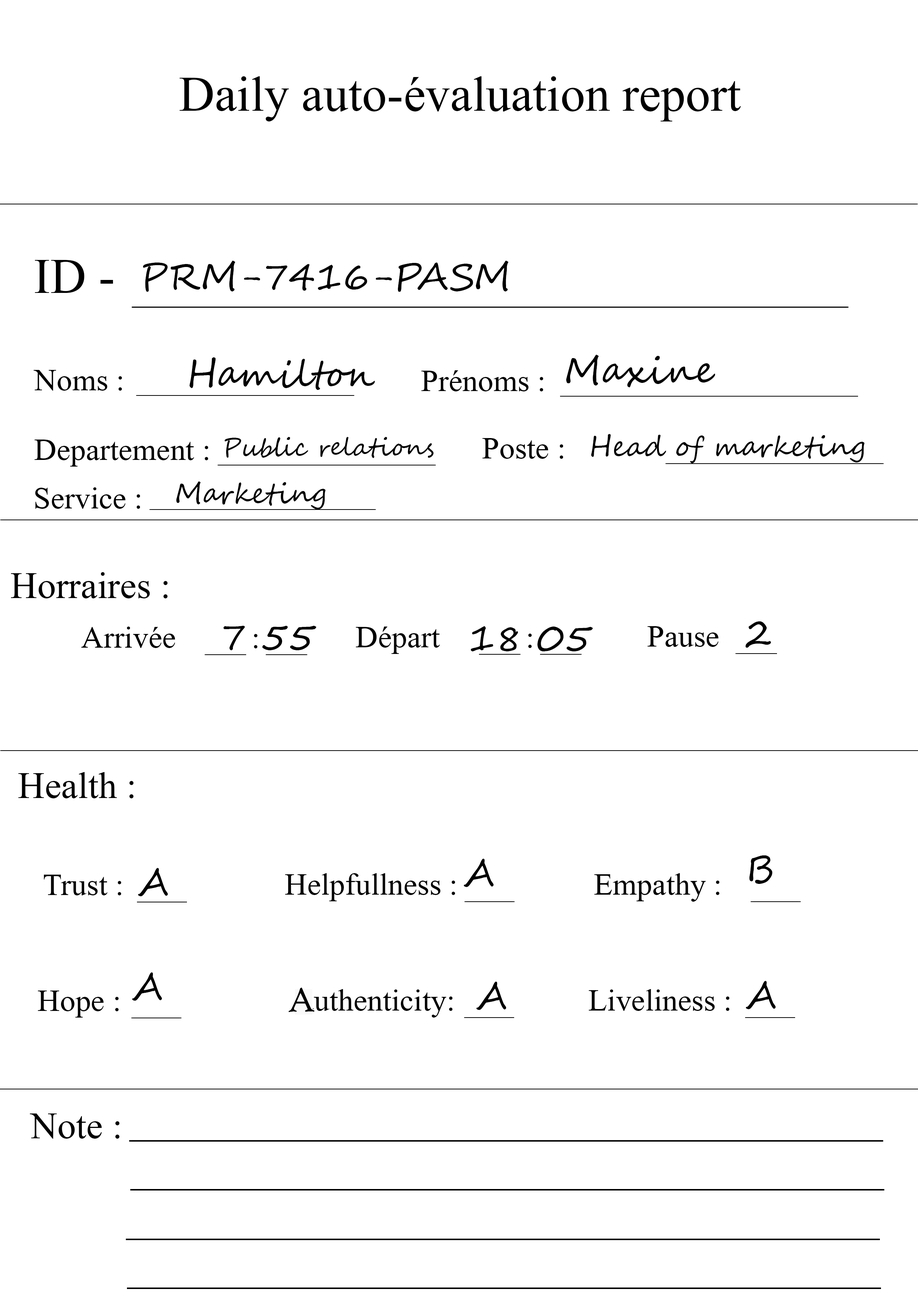
<style>
.page{position:relative;width:918px;height:1299px;background:#ffffff}
.page>*{position:absolute;margin:0}
.t1{font:74px "Microsoft-Himalaya";color:#000000}
.t2{font:37px "SegoeScript";color:#000000}
.t3{font:46.3px "Microsoft-Himalaya";color:#000000}
.t4{font:24.7px "SegoeScript";color:#000000}
.t5{font:27.8px "SegoeScript";color:#000000}
.t6{font:55.5px "Microsoft-Himalaya";color:#000000}
.t7{font:37px "HighTowerText-Reg";color:#000000}
</style>
<div class="page">
<p class="t1" style="left:180px;top:76px;width:561px;height:45px">Daily auto-évaluation report</p>
<p class="t1" style="left:35px;top:260px;width:78px;height:33px">ID -</p>
<p class="t2" style="left:143px;top:261px;width:366px;height:31px">PRM-7416-PASM</p>
<p class="t2" style="left:190px;top:357px;width:185px;height:33px">Hamilton</p>
<p class="t2" style="left:566px;top:355px;width:149px;height:32px">Maxine</p>
<p class="t3" style="left:34px;top:370px;width:88px;height:21px">Noms :</p>
<p class="t3" style="left:421px;top:370px;width:122px;height:21px">Prénoms :</p>
<p class="t4" style="left:225px;top:437px;width:209px;height:21px">Public relations</p>
<p class="t3" style="left:482px;top:438px;width:81px;height:21px">Poste :</p>
<p class="t5" style="left:591px;top:434px;width:274px;height:29px">Head of marketing</p>
<p class="t3" style="left:34px;top:439px;width:174px;height:27px">Departement :</p>
<p class="t5" style="left:176px;top:481px;width:150px;height:28px">Marketing</p>
<p class="t3" style="left:35px;top:487px;width:105px;height:22px">Service :</p>
<p class="t6" style="left:11px;top:572px;width:157px;height:26px">Horraires :</p>
<p class="t3" style="left:81px;top:626px;width:94px;height:22px">Arrivée</p>
<p class="t2" style="left:223px;top:626px;width:94px;height:24px">7 55</p>
<p class="t3" style="left:356px;top:626px;width:84px;height:28px">Départ</p>
<p class="t2" style="left:471px;top:626px;width:122px;height:25px">18 05</p>
<p class="t3" style="left:648px;top:626px;width:71px;height:21px">Pause</p>
<p class="t2" style="left:746px;top:621px;width:25px;height:27px">2</p>
<p class="t3" style="left:254px;top:634px;width:4px;height:14px">:</p>
<p class="t3" style="left:528px;top:633px;width:4px;height:15px">:</p>
<p class="t6" style="left:18px;top:772px;width:116px;height:26px">Health :</p>
<p class="t2" style="left:749px;top:855px;width:24px;height:29px">B</p>
<p class="t2" style="left:138px;top:868px;width:30px;height:28px">A</p>
<p class="t2" style="left:464px;top:859px;width:30px;height:28px">A</p>
<p class="t3" style="left:44px;top:874px;width:77px;height:21px">Trust :</p>
<p class="t3" style="left:285px;top:873px;width:170px;height:28px">Helpfullness :</p>
<p class="t3" style="left:594px;top:873px;width:126px;height:28px">Empathy :</p>
<p class="t2" style="left:132px;top:972px;width:30px;height:29px">A</p>
<p class="t7" style="left:288px;top:987px;width:27px;height:25px">A</p>
<p class="t3" style="left:301px;top:989px;width:152px;height:28px">authenticity:</p>
<p class="t2" style="left:476px;top:981px;width:30px;height:29px">A</p>
<p class="t3" style="left:589px;top:989px;width:141px;height:22px">Liveliness :</p>
<p class="t2" style="left:746px;top:981px;width:30px;height:28px">A</p>
<p class="t3" style="left:38px;top:990px;width:81px;height:27px">Hope :</p>
<p class="t6" style="left:30px;top:1113px;width:90px;height:25px">Note :</p>
</div>
